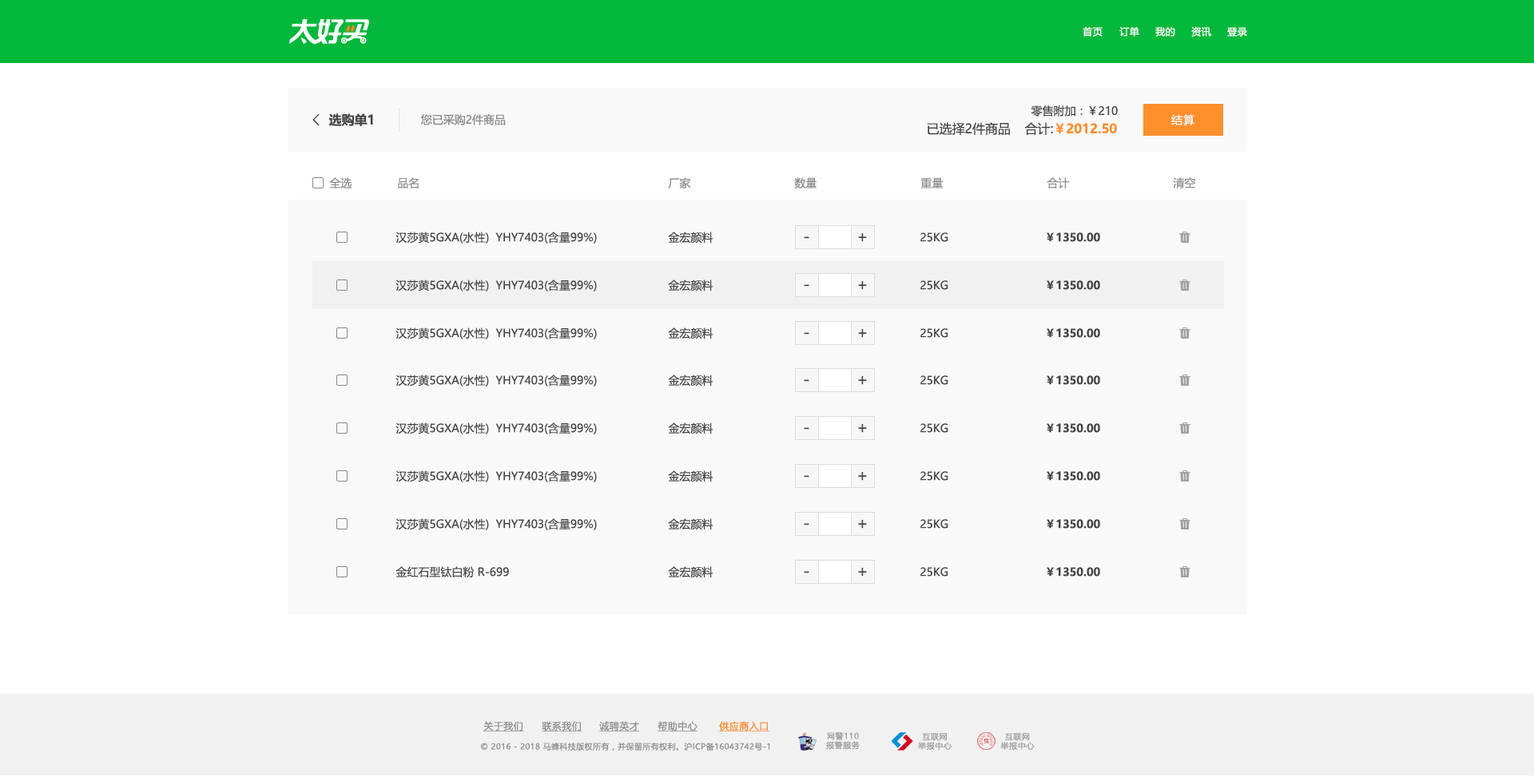
<style>
.page{position:relative;width:1534px;height:777px;background:#ffffff}
.page>*{position:absolute;margin:0}
.t1{font:9.6px "MicrosoftYaHeiUI";letter-spacing:0.04em;color:#ffffff}
.t2{font:16px "FangSong";color:#444444;font-weight:bold}
.t3{font:12.8px "MicrosoftYaHeiUI-Bold";color:#444444}
.t4{font:11.2px "MicrosoftYaHeiUI";color:#444444}
.t5{font:11.2px "MicrosoftYaHeiUI";color:#888888}
.t6{font:12.8px "MicrosoftYaHeiUI";color:#444444}
.t7{font:12.8px "MicrosoftYaHeiUI-Bold";color:#ff8f2b}
.t8{font:11.2px "MicrosoftYaHeiUI";letter-spacing:0.06em;color:#f7f7f7}
.t9{font:11.2px "MicrosoftYaHeiUI";color:#8c8c8c}
.t10{font:16px "MicrosoftYaHeiUI";letter-spacing:0.06em;color:#444444}
.t11{font:11.2px "MicrosoftYaHeiUI-Bold";color:#444444}
.t12{font:9.6px "MicrosoftYaHeiUI";letter-spacing:0.04em;color:#8c8c8c;text-decoration:underline}
.t13{font:9.6px "MicrosoftYaHeiUI";letter-spacing:0.04em;color:#ff8b25;text-decoration:underline}
.t14{font:8px/9.3px "MicrosoftYaHei";letter-spacing:0.06em;color:#999999}
.t15{font:8px "MicrosoftYaHeiUI";letter-spacing:0.04em;color:#8c8c8c}
</style>
<div class="page">
<p class="t1" style="left:1083px;top:26px;width:20px;height:11px">首页</p>
<p class="t1" style="left:1119px;top:26px;width:20px;height:11px">订单</p>
<p class="t1" style="left:1155px;top:26px;width:20px;height:11px">我的</p>
<p class="t1" style="left:1191px;top:26px;width:20px;height:11px">资讯</p>
<p class="t1" style="left:1227px;top:27px;width:20px;height:10px">登录</p>
<p class="t2" style="left:312px;top:113px;width:8px;height:13px">&lt;</p>
<p class="t3" style="left:328px;top:113px;width:45px;height:13px">选购单1</p>
<p class="t4" style="left:1031px;top:105px;width:87px;height:12px">零售附加：￥210</p>
<p class="t5" style="left:420px;top:114px;width:86px;height:11px">您已采购2件商品</p>
<p class="t6" style="left:927px;top:122px;width:83px;height:13px">已选择2件商品</p>
<p class="t7" style="left:1024px;top:122px;width:93px;height:13px"><span class="t6">合计:</span>￥2012.50</p>
<p class="t8" style="left:1171px;top:114px;width:23px;height:12px">结算</p>
<p class="t9" style="left:329px;top:177px;width:23px;height:12px">全选</p>
<p class="t9" style="left:398px;top:177px;width:21px;height:12px">品名</p>
<p class="t9" style="left:668px;top:177px;width:23px;height:12px">厂家</p>
<p class="t9" style="left:794px;top:177px;width:23px;height:12px">数量</p>
<p class="t9" style="left:920px;top:177px;width:24px;height:12px">重量</p>
<p class="t9" style="left:1047px;top:177px;width:23px;height:12px">合计</p>
<p class="t9" style="left:1173px;top:177px;width:23px;height:12px">清空</p>
<p class="t4" style="left:395px;top:232px;width:202px;height:12px">汉莎黄5GXA(水性)  YHY7403(含量99%)</p>
<p class="t4" style="left:668px;top:232px;width:45px;height:12px">金宏颜料</p>
<p class="t10" style="left:858px;top:233px;width:9px;height:9px">+</p>
<p class="t4" style="left:920px;top:232px;width:28px;height:10px">25KG</p>
<p class="t11" style="left:1047px;top:232px;width:53px;height:10px">￥1350.00</p>
<p class="t10" style="left:804px;top:236px;width:5px;height:3px">-</p>
<p class="t4" style="left:395px;top:280px;width:202px;height:12px">汉莎黄5GXA(水性)  YHY7403(含量99%)</p>
<p class="t4" style="left:668px;top:280px;width:45px;height:12px">金宏颜料</p>
<p class="t10" style="left:858px;top:281px;width:9px;height:9px">+</p>
<p class="t4" style="left:920px;top:280px;width:28px;height:10px">25KG</p>
<p class="t11" style="left:1047px;top:280px;width:53px;height:10px">￥1350.00</p>
<p class="t10" style="left:804px;top:284px;width:5px;height:3px">-</p>
<p class="t4" style="left:395px;top:328px;width:202px;height:12px">汉莎黄5GXA(水性)  YHY7403(含量99%)</p>
<p class="t4" style="left:668px;top:328px;width:45px;height:12px">金宏颜料</p>
<p class="t10" style="left:858px;top:329px;width:9px;height:9px">+</p>
<p class="t4" style="left:920px;top:328px;width:28px;height:10px">25KG</p>
<p class="t11" style="left:1047px;top:328px;width:53px;height:10px">￥1350.00</p>
<p class="t10" style="left:804px;top:332px;width:5px;height:3px">-</p>
<p class="t4" style="left:395px;top:375px;width:202px;height:12px">汉莎黄5GXA(水性)  YHY7403(含量99%)</p>
<p class="t4" style="left:668px;top:375px;width:45px;height:12px">金宏颜料</p>
<p class="t10" style="left:858px;top:376px;width:9px;height:9px">+</p>
<p class="t4" style="left:920px;top:375px;width:28px;height:10px">25KG</p>
<p class="t11" style="left:1047px;top:375px;width:53px;height:10px">￥1350.00</p>
<p class="t10" style="left:804px;top:379px;width:5px;height:3px">-</p>
<p class="t4" style="left:395px;top:423px;width:202px;height:12px">汉莎黄5GXA(水性)  YHY7403(含量99%)</p>
<p class="t4" style="left:668px;top:423px;width:45px;height:12px">金宏颜料</p>
<p class="t10" style="left:858px;top:424px;width:9px;height:9px">+</p>
<p class="t4" style="left:920px;top:423px;width:28px;height:10px">25KG</p>
<p class="t11" style="left:1047px;top:423px;width:53px;height:10px">￥1350.00</p>
<p class="t10" style="left:804px;top:427px;width:5px;height:3px">-</p>
<p class="t4" style="left:395px;top:471px;width:202px;height:12px">汉莎黄5GXA(水性)  YHY7403(含量99%)</p>
<p class="t4" style="left:668px;top:471px;width:45px;height:12px">金宏颜料</p>
<p class="t10" style="left:858px;top:472px;width:9px;height:9px">+</p>
<p class="t4" style="left:920px;top:471px;width:28px;height:10px">25KG</p>
<p class="t11" style="left:1047px;top:471px;width:53px;height:10px">￥1350.00</p>
<p class="t10" style="left:804px;top:475px;width:5px;height:3px">-</p>
<p class="t4" style="left:395px;top:519px;width:202px;height:11px">汉莎黄5GXA(水性)  YHY7403(含量99%)</p>
<p class="t4" style="left:668px;top:519px;width:45px;height:11px">金宏颜料</p>
<p class="t10" style="left:858px;top:520px;width:9px;height:9px">+</p>
<p class="t4" style="left:920px;top:519px;width:28px;height:10px">25KG</p>
<p class="t11" style="left:1047px;top:519px;width:53px;height:10px">￥1350.00</p>
<p class="t10" style="left:804px;top:523px;width:5px;height:3px">-</p>
<p class="t4" style="left:395px;top:566px;width:114px;height:12px">金红石型钛白粉 R-699</p>
<p class="t4" style="left:668px;top:566px;width:45px;height:12px">金宏颜料</p>
<p class="t10" style="left:858px;top:568px;width:9px;height:9px">+</p>
<p class="t4" style="left:920px;top:567px;width:28px;height:10px">25KG</p>
<p class="t11" style="left:1047px;top:567px;width:53px;height:10px">￥1350.00</p>
<p class="t10" style="left:804px;top:571px;width:5px;height:3px">-</p>
<p class="t12" style="left:483px;top:721px;width:41px;height:11px">关于我们</p>
<p class="t12" style="left:542px;top:721px;width:40px;height:11px">联系我们</p>
<p class="t12" style="left:599px;top:721px;width:41px;height:11px">诚聘英才</p>
<p class="t12" style="left:658px;top:721px;width:40px;height:11px">帮助中心</p>
<p class="t13" style="left:719px;top:721px;width:50px;height:11px">供应商入口</p>
<p class="t14" style="left:826px;top:732px;width:34px;height:18px;text-align:center">网警110<br>报警服务</p>
<p class="t14" style="left:918px;top:733px;width:34px;height:17px;text-align:center">互联网<br>举报中心</p>
<p class="t14" style="left:1000px;top:733px;width:35px;height:17px;text-align:center">互联网<br>举报中心</p>
<p class="t15" style="left:481px;top:742px;width:289px;height:9px">© 2016 - 2018 马蜂科技版权所有，并保留所有权利。沪ICP备16043742号-1</p>
</div>
